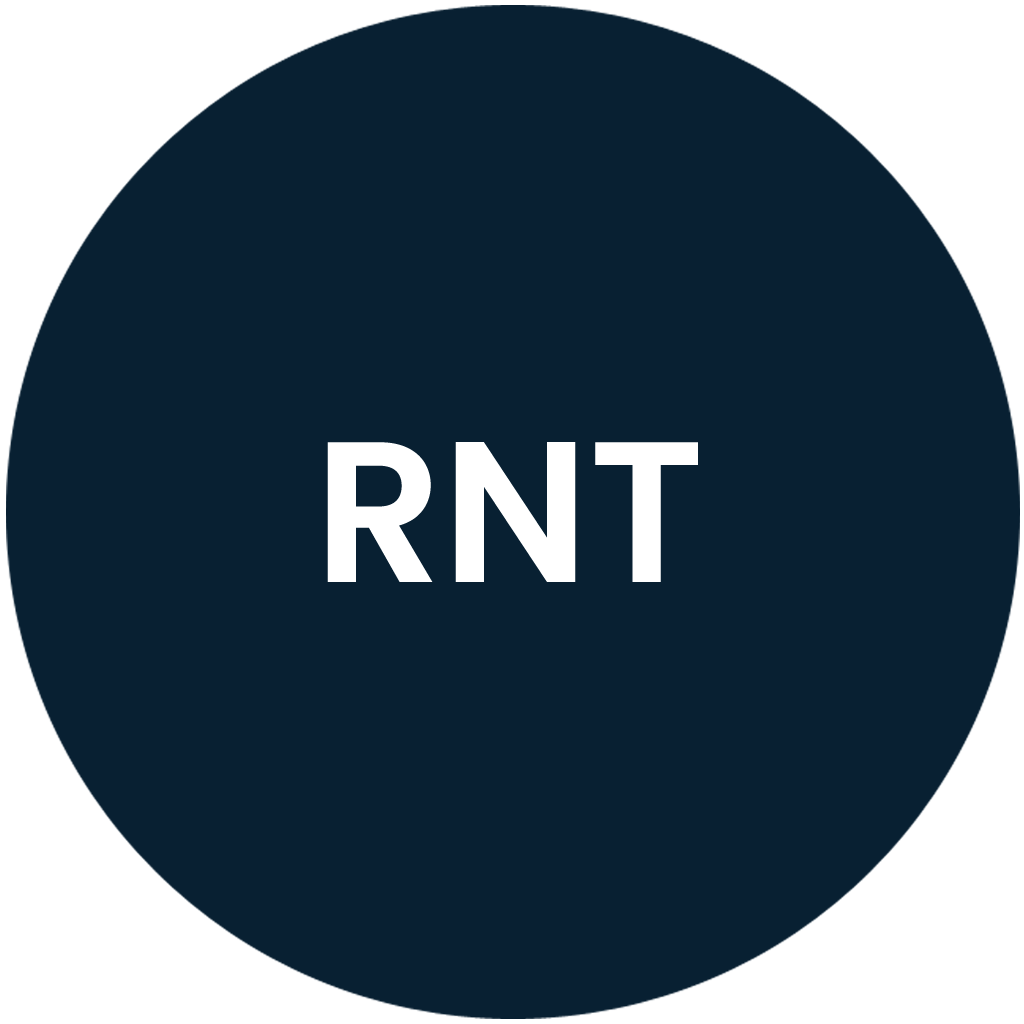
<style>
.page{position:relative;width:1024px;height:1024px;background:#082032}
.page>*{position:absolute;margin:0}
.t1{font:200px "Poppins-SemiBold";color:#ffffff}
</style>
<div class="page">
<p class="t1" style="left:327px;top:442px;width:371px;height:140px">RNT</p>
</div>
